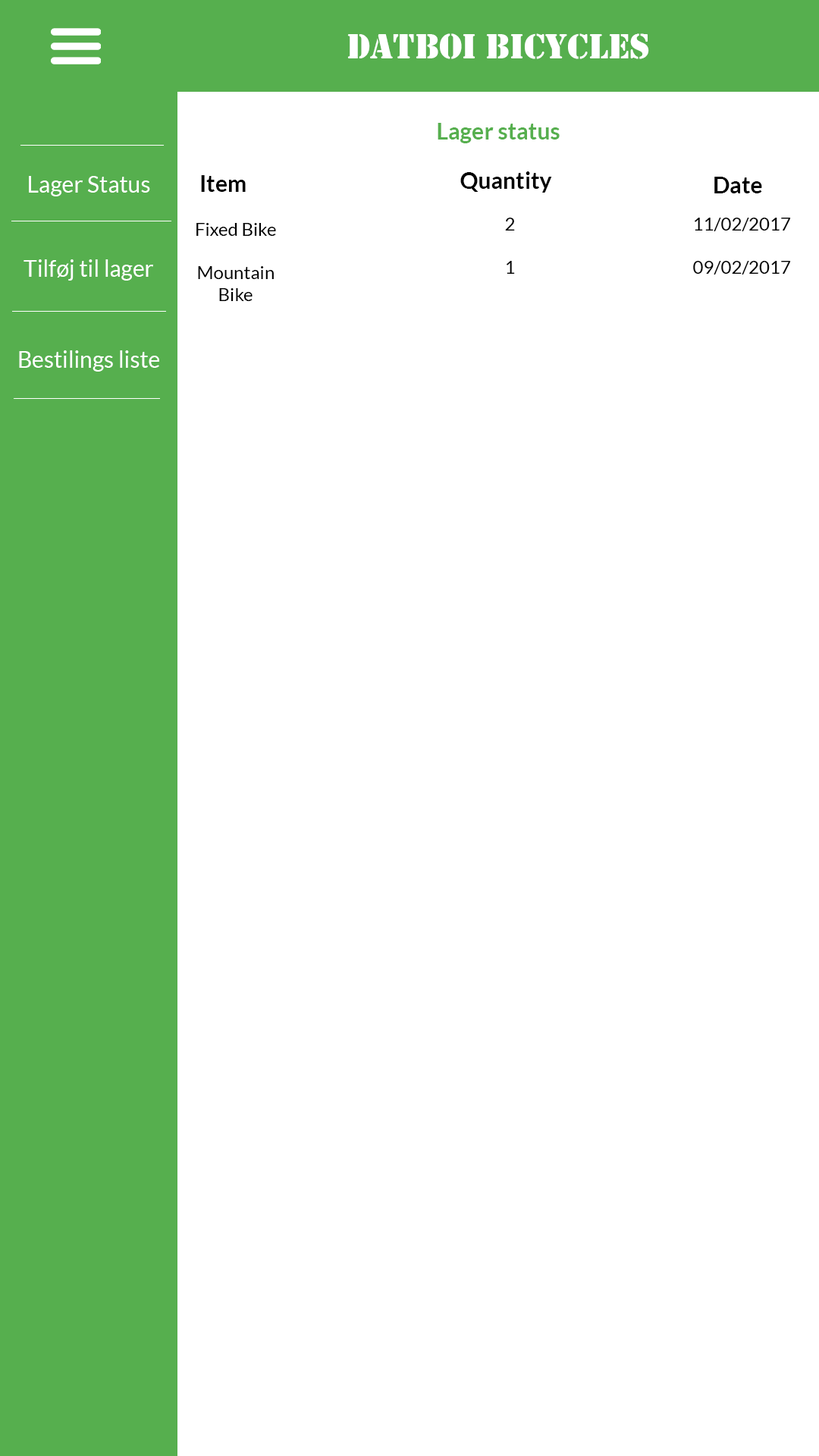
<style>
.page{position:relative;width:819px;height:1456px;background:#ffffff}
.page>*{position:absolute;margin:0}
.t1{font:36.4px "Stencil";color:#ffffff}
.t2{font:22.7px "Lato-Bold";color:#56af4e}
.t3{font:22.7px "Lato-Regular";color:#56af4e}
.t4{font:22.7px "Lato-Bold";color:#000000}
.t5{font:22.7px "Lato-Regular";color:#ffffff}
.t6{font:18.2px "Lato-Regular";color:#000000}
</style>
<div class="page">
<p class="t1" style="left:347px;top:33px;width:302px;height:26px">datBoi Bicycles</p>
<p class="t2" style="left:438px;top:123px;width:122px;height:20px"><span class="t3"><br></span>Lager status</p>
<p class="t4" style="left:460px;top:171px;width:92px;height:22px">Quantity</p>
<p class="t5" style="left:29px;top:176px;width:121px;height:20px">Lager Status</p>
<p class="t4" style="left:201px;top:175px;width:45px;height:17px">Item</p>
<p class="t4" style="left:714px;top:177px;width:48px;height:16px">Date</p>
<p class="t6" style="left:505px;top:218px;width:10px;height:13px">2</p>
<p class="t6" style="left:695px;top:218px;width:96px;height:13px">11/02/2017</p>
<p class="t6" style="left:196px;top:223px;width:80px;height:13px">Fixed Bike</p>
<p class="t5" style="left:24px;top:259px;width:129px;height:22px">Tilføj til lager</p>
<p class="t6" style="left:198px;top:266px;width:76px;height:35px;text-align:center">Mountain Bike</p>
<p class="t6" style="left:507px;top:261px;width:8px;height:13px">1</p>
<p class="t6" style="left:693px;top:261px;width:98px;height:14px">09/02/2017</p>
<p class="t5" style="left:19px;top:350px;width:140px;height:22px">Bestilings liste</p>
</div>
